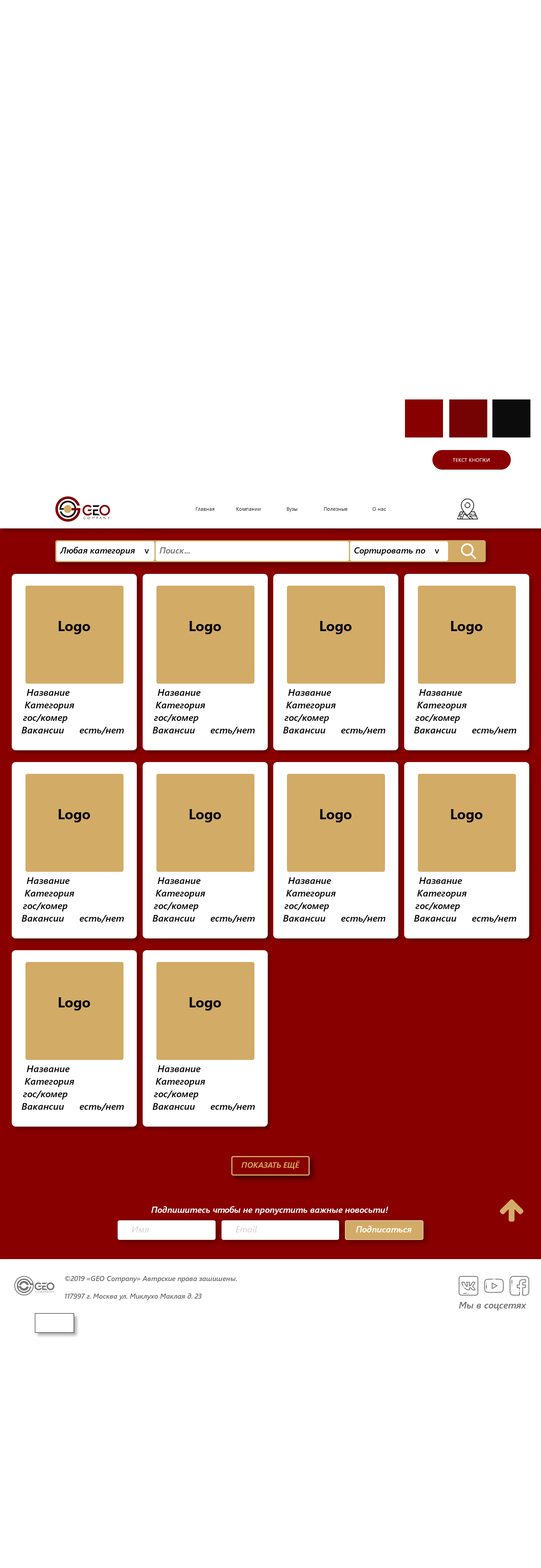
<style>
.page{position:relative;width:541px;height:1568px;background:#ffffff}
.page>*{position:absolute;margin:0}
.t1{font:5.1px "SegoeUI";color:#f7f7f7;text-transform:uppercase}
.t2{font:5.1px "SegoeUI";color:#0c0c0c}
.t3{font:8.6px "SegoeUI-SemiboldItalic";color:#000000}
.t4{font:8.6px "SegoeUI-Semibold";color:#000000}
.t5{font:8.6px "SegoeUI-SemiboldItalic";color:#727272}
.t6{font:14.1px "SegoeUI-Bold";color:#050505}
.t7{font:9.4px "SegoeUI-SemiboldItalic";color:#050505}
.t8{font:7.8px "SegoeUI-SemiboldItalic";color:#d2ab67;text-transform:uppercase}
.t9{font:8.6px "SegoeUI-SemiboldItalic";color:#ffffff}
.t10{font:8.6px "SegoeUI-SemiboldItalic";color:#dedcdc}
.t11{font:7.1px/17.6px "SegoeUI-SemiboldItalic";color:#727272}
.t12{font:9.4px "SegoeUI-SemiboldItalic";color:#727272}
</style>
<div class="page">
<p class="t1" style="left:453px;top:458px;width:37px;height:4px">Текст кнопки</p>
<p class="t2" style="left:196px;top:507px;width:18px;height:4px">Главная</p>
<p class="t2" style="left:236px;top:507px;width:25px;height:4px">Компании</p>
<p class="t2" style="left:287px;top:507px;width:11px;height:5px">Вузы</p>
<p class="t2" style="left:324px;top:507px;width:23px;height:4px">Полезные</p>
<p class="t2" style="left:372px;top:507px;width:14px;height:4px">О нас</p>
<p class="t3" style="left:60px;top:547px;width:89px;height:8px">Любая категория    <span class="t4">v</span></p>
<p class="t5" style="left:160px;top:547px;width:30px;height:7px">Поиск...</p>
<p class="t3" style="left:354px;top:547px;width:85px;height:8px">Сортировать по    <span class="t4">v</span></p>
<p class="t6" style="left:58px;top:621px;width:32px;height:13px">Logo</p>
<p class="t6" style="left:189px;top:621px;width:32px;height:13px">Logo</p>
<p class="t6" style="left:320px;top:621px;width:32px;height:13px">Logo</p>
<p class="t6" style="left:451px;top:621px;width:32px;height:13px">Logo</p>
<p class="t7" style="left:27px;top:689px;width:43px;height:7px">Название</p>
<p class="t7" style="left:158px;top:689px;width:43px;height:7px">Название</p>
<p class="t7" style="left:288px;top:689px;width:43px;height:7px">Название</p>
<p class="t7" style="left:419px;top:689px;width:43px;height:7px">Название</p>
<p class="t7" style="left:25px;top:702px;width:49px;height:9px">Категория</p>
<p class="t7" style="left:156px;top:702px;width:49px;height:9px">Категория</p>
<p class="t7" style="left:286px;top:702px;width:50px;height:9px">Категория</p>
<p class="t7" style="left:417px;top:702px;width:50px;height:9px">Категория</p>
<p class="t7" style="left:23px;top:714px;width:44px;height:9px">гос/комер</p>
<p class="t7" style="left:154px;top:714px;width:44px;height:9px">гос/комер</p>
<p class="t7" style="left:285px;top:714px;width:44px;height:9px">гос/комер</p>
<p class="t7" style="left:416px;top:714px;width:44px;height:9px">гос/комер</p>
<p class="t7" style="left:22px;top:727px;width:42px;height:6px">Вакансии</p>
<p class="t7" style="left:80px;top:727px;width:44px;height:8px">есть/нет</p>
<p class="t7" style="left:152px;top:727px;width:43px;height:6px">Вакансии</p>
<p class="t7" style="left:211px;top:727px;width:44px;height:8px">есть/нет</p>
<p class="t7" style="left:283px;top:727px;width:42px;height:6px">Вакансии</p>
<p class="t7" style="left:341px;top:727px;width:44px;height:8px">есть/нет</p>
<p class="t7" style="left:414px;top:727px;width:42px;height:6px">Вакансии</p>
<p class="t7" style="left:472px;top:727px;width:44px;height:8px">есть/нет</p>
<p class="t6" style="left:58px;top:809px;width:32px;height:13px">Logo</p>
<p class="t6" style="left:189px;top:809px;width:32px;height:13px">Logo</p>
<p class="t6" style="left:320px;top:809px;width:32px;height:13px">Logo</p>
<p class="t6" style="left:451px;top:809px;width:32px;height:13px">Logo</p>
<p class="t7" style="left:27px;top:877px;width:43px;height:7px">Название</p>
<p class="t7" style="left:158px;top:877px;width:43px;height:7px">Название</p>
<p class="t7" style="left:288px;top:877px;width:43px;height:7px">Название</p>
<p class="t7" style="left:419px;top:877px;width:43px;height:7px">Название</p>
<p class="t7" style="left:25px;top:890px;width:49px;height:9px">Категория</p>
<p class="t7" style="left:156px;top:890px;width:49px;height:9px">Категория</p>
<p class="t7" style="left:286px;top:890px;width:50px;height:9px">Категория</p>
<p class="t7" style="left:417px;top:890px;width:50px;height:9px">Категория</p>
<p class="t7" style="left:23px;top:902px;width:44px;height:9px">гос/комер</p>
<p class="t7" style="left:154px;top:902px;width:44px;height:9px">гос/комер</p>
<p class="t7" style="left:285px;top:902px;width:44px;height:9px">гос/комер</p>
<p class="t7" style="left:416px;top:902px;width:44px;height:9px">гос/комер</p>
<p class="t7" style="left:22px;top:915px;width:42px;height:7px">Вакансии</p>
<p class="t7" style="left:80px;top:915px;width:44px;height:8px">есть/нет</p>
<p class="t7" style="left:152px;top:915px;width:43px;height:7px">Вакансии</p>
<p class="t7" style="left:211px;top:915px;width:44px;height:8px">есть/нет</p>
<p class="t7" style="left:283px;top:915px;width:42px;height:7px">Вакансии</p>
<p class="t7" style="left:341px;top:915px;width:44px;height:8px">есть/нет</p>
<p class="t7" style="left:414px;top:915px;width:42px;height:7px">Вакансии</p>
<p class="t7" style="left:472px;top:915px;width:44px;height:8px">есть/нет</p>
<p class="t6" style="left:58px;top:997px;width:32px;height:14px">Logo</p>
<p class="t6" style="left:189px;top:997px;width:32px;height:14px">Logo</p>
<p class="t7" style="left:27px;top:1065px;width:43px;height:7px">Название</p>
<p class="t7" style="left:158px;top:1065px;width:43px;height:7px">Название</p>
<p class="t7" style="left:25px;top:1078px;width:49px;height:9px">Категория</p>
<p class="t7" style="left:156px;top:1078px;width:49px;height:9px">Категория</p>
<p class="t7" style="left:23px;top:1091px;width:44px;height:9px">гос/комер</p>
<p class="t7" style="left:154px;top:1091px;width:44px;height:9px">гос/комер</p>
<p class="t7" style="left:22px;top:1103px;width:42px;height:7px">Вакансии</p>
<p class="t7" style="left:80px;top:1103px;width:44px;height:8px">есть/нет</p>
<p class="t7" style="left:152px;top:1103px;width:43px;height:7px">Вакансии</p>
<p class="t7" style="left:211px;top:1103px;width:44px;height:8px">есть/нет</p>
<p class="t8" style="left:241px;top:1161px;width:58px;height:8px">показать ещё</p>
<p class="t9" style="left:151px;top:1206px;width:237px;height:9px">Подпишитесь чтобы не пропустить важные новосьти!</p>
<p class="t10" style="left:132px;top:1226px;width:17px;height:6px">Имя</p>
<p class="t10" style="left:236px;top:1226px;width:21px;height:6px">Email</p>
<p class="t9" style="left:356px;top:1226px;width:56px;height:6px">Подписаться</p>
<p class="t11" style="left:65px;top:1276px;width:172px;height:24px">©2019 «GEO Company» Автрские права зашишены.<br>117997 г. Москва ул. Миклухо Маклая д. 23</p>
<p class="t12" style="left:459px;top:1302px;width:67px;height:8px">Мы в соцсетях</p>
</div>
